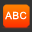
<style>
.page{position:relative;width:32px;height:32px;background:#333333}
.page>*{position:absolute;margin:0}
.t1{font:10px "ArialMT";letter-spacing:0.05em;color:#ffffff}
</style>
<div class="page">
<p class="t1" style="left:5px;top:11px;width:22px;height:9px">ABC</p>
</div>
